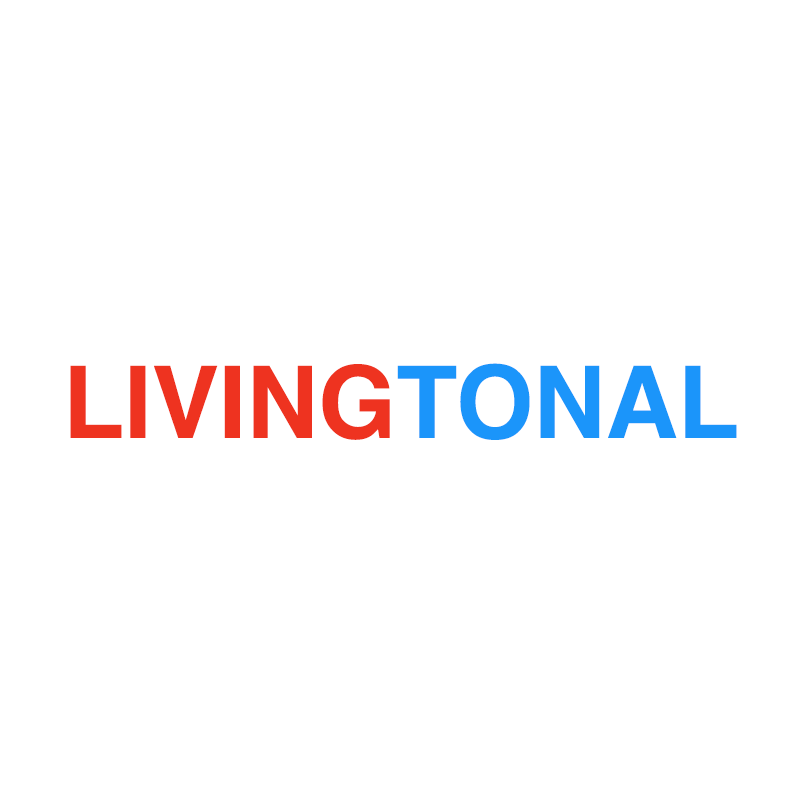
<style>
.page{position:relative;width:800px;height:800px;background:#ffffff}
.page>*{position:absolute;margin:0}
.t1{font:100px "Helvetica-Bold";color:#ee3320}
.t2{font:100px "Helvetica-Bold";color:#1b95fa}
</style>
<div class="page">
<p class="t1" style="left:70px;top:363px;width:667px;height:77px">LIVING<span class="t2">TONAL</span></p>
</div>
